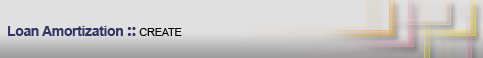
<style>
.page{position:relative;width:483px;height:58px;background:#e1e0e0}
.page>*{position:absolute;margin:0}
.t1{font:14px "Arial-BoldMT";letter-spacing:-0.025em;color:#333366}
.t2{font:18px "SegoeUI-Bold";letter-spacing:-0.025em;color:#333366}
.t3{font:11px "ArialMT";letter-spacing:-0.025em;color:#070707}
</style>
<div class="page">
<p class="t1" style="left:8px;top:26px;width:174px;height:10px">Loan Amortization <span class="t2">:: </span><span class="t3">CREATE</span></p>
</div>
